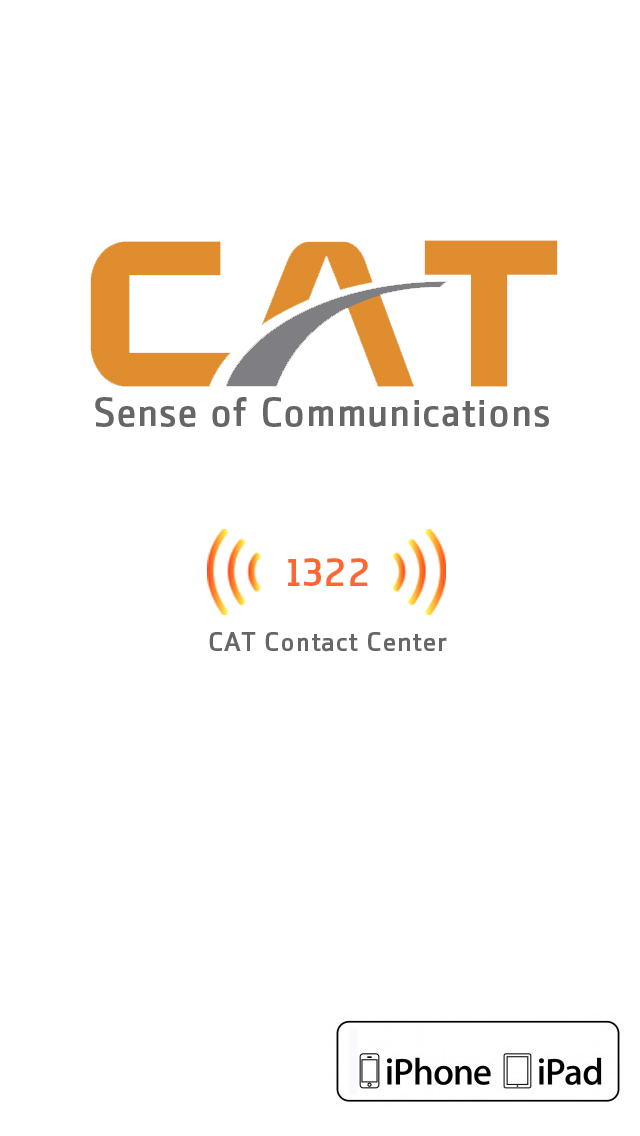
<style>
.page{position:relative;width:640px;height:1136px;background:#ffffff}
.page>*{position:absolute;margin:0}
.t1{font:44px "CAT-Bold";letter-spacing:0.02em;color:#666666}
.t2{font:44px "CAT-Bold";letter-spacing:0.02em;color:#ff6633}
.t3{font:30px "CAT-Bold";letter-spacing:0.02em;color:#666666}
</style>
<div class="page">
<p class="t1" style="left:95px;top:397px;width:454px;height:30px">Sense of Communications</p>
<p class="t2" style="left:288px;top:558px;width:80px;height:28px">1322</p>
<p class="t3" style="left:209px;top:632px;width:238px;height:20px">CAT Contact Center</p>
</div>
